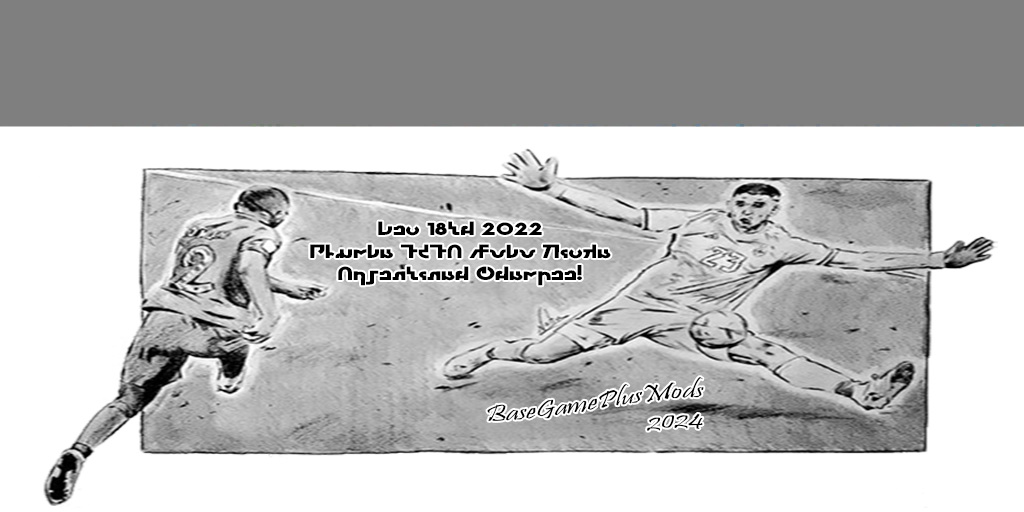
<style>
.page{position:relative;width:1024px;height:512px;background:#ffffff}
.page>*{position:absolute;margin:0}
.t1{font:18.7px "SimlishFZ_NootrasimBold";color:#000000;scale:1.33 1}
.t2{font:24px "Pristina-Regular";color:#000000;scale:1.33 1}
</style>
<div class="page">
<p class="t1" style="left:310px;top:221px;width:301px;height:65px;text-align:center">Dec 18th 2022<br>Plumba FIFA Zobo Kicka<br>Arjentinah Champee!</p>
<p class="t2" style="left:487px;top:377px;width:217px;height:54px;text-align:right">BaseGamePlusMods<br>2024</p>
</div>
